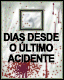
<style>
.page{position:relative;width:64px;height:80px}
.page>*{position:absolute;margin:0}
.t1{font:10.7px/10.7px "Arial-BoldMT";letter-spacing:-0.06em;color:#000000;text-transform:uppercase;font-weight:bold;scale:0.9 1}
</style>
<div class="page">
<p class="t1" style="left:3px;top:32px;width:56px;height:31px;text-align:center">dias desde<br>o último<br>acidente</p>
</div>
